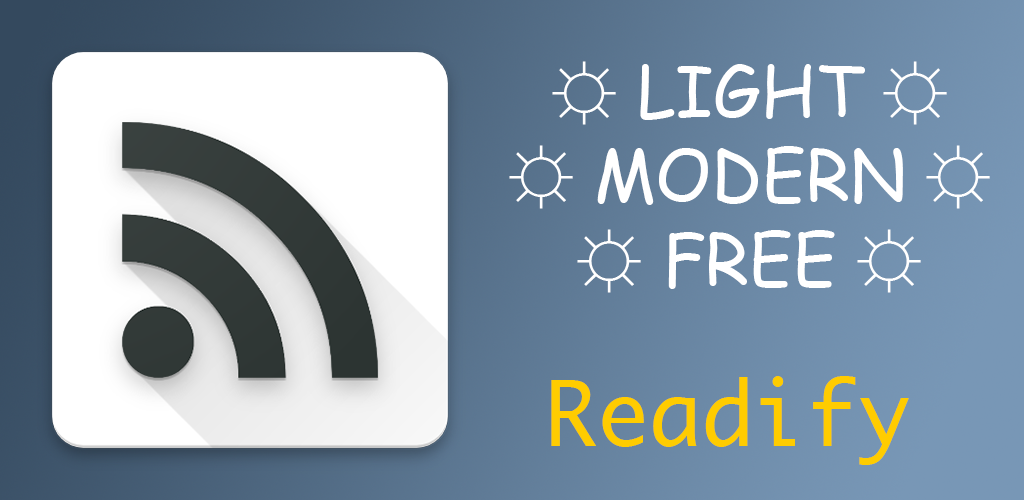
<style>
.page{position:relative;width:1024px;height:500px}
.page>*{position:absolute;margin:0}
.t1{font:70px "ComicSansMS";color:#ffffff}
.t2{font:70px "ArialMT";color:#ffffff}
.t3{font:87px "Monaco";color:#ffcc00}
</style>
<div class="page">
<p class="t1" style="left:509px;top:61px;width:481px;height:232px;text-align:center"><span class="t2">☼</span> LIGHT <span class="t2">☼</span><br><span class="t2">☼</span> MODERN <span class="t2">☼</span><br><span class="t2">☼</span> FREE <span class="t2">☼</span></p>
<p class="t3" style="left:551px;top:376px;width:358px;height:89px">Readify</p>
</div>
